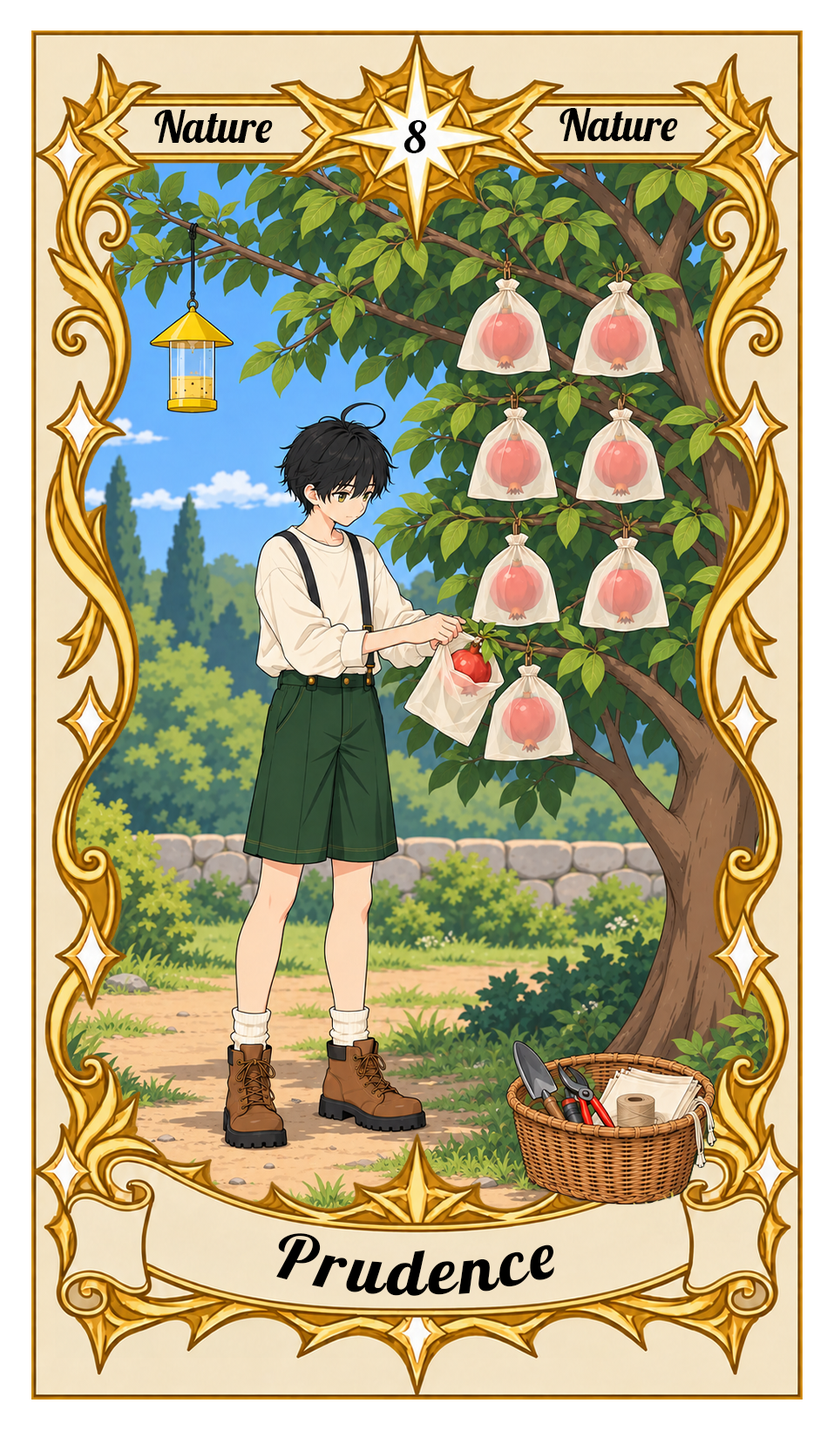
<style>
.page{position:relative;width:834px;height:1430px}
.page>*{position:absolute;margin:0}
.t1{font:43.6px "Lobster-Regular";color:#000000}
.t2{font:65.3px "Lobster-Regular";letter-spacing:0.05em;color:#000000}
</style>
<div class="page">
<p class="t1" style="left:154px;top:110px;width:119px;height:33px">Nature</p>
<p class="t1" style="left:559px;top:108px;width:119px;height:33px">Nature</p>
<p class="t1" style="left:403px;top:120px;width:24px;height:33px">8</p>
<p class="t2" style="left:276px;top:1233px;width:278px;height:63px">Prudence</p>
</div>
